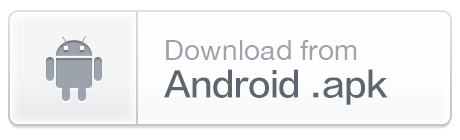
<style>
.page{position:relative;width:460px;height:140px;background:#fefefe}
.page>*{position:absolute;margin:0}
.t1{font:28px "HelveticaNeue";color:#9da3ac}
.t2{font:34px "FZLTZHK--GBK1-0";color:#5c6572}
</style>
<div class="page">
<p class="t1" style="left:166px;top:40px;width:191px;height:20px">Download from</p>
<p class="t2" style="left:164px;top:69px;width:224px;height:36px">Android .apk</p>
</div>
